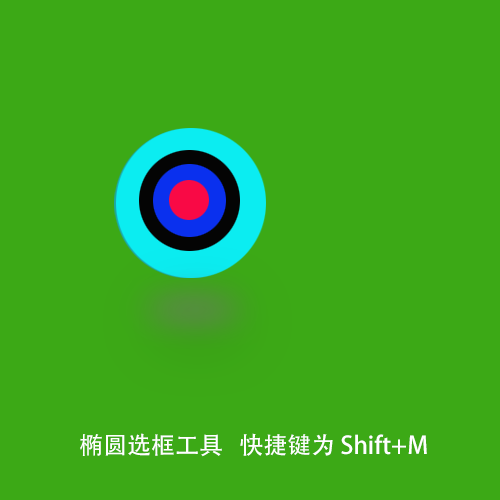
<style>
.page{position:relative;width:500px;height:500px;background:#3ca916}
.page>*{position:absolute;margin:0}
.t1{font:24px "AdobeHeitiStd-Regular";color:#ffffff}
</style>
<div class="page">
<p class="t1" style="left:80px;top:433px;width:347px;height:24px">椭圆选框工具   快捷键为 Shift+M</p>
</div>
